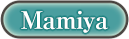
<style>
.page{position:relative;width:129px;height:39px}
.page>*{position:absolute;margin:0}
.t1{font:24px "RyuminPro-ExBold";letter-spacing:-0.04em;color:#ffffff}
</style>
<div class="page">
<p class="t1" style="left:21px;top:10px;width:88px;height:23px">Mamiya</p>
</div>
